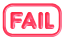
<style>
.page{position:relative;width:65px;height:40px;background:#ffffff}
.page>*{position:absolute;margin:0}
.t1{font:24px "Junegull-Regular"}
</style>
<div class="page">
<p class="t1" style="left:10px;top:12px;width:45px;height:17px">Fail</p>
</div>
